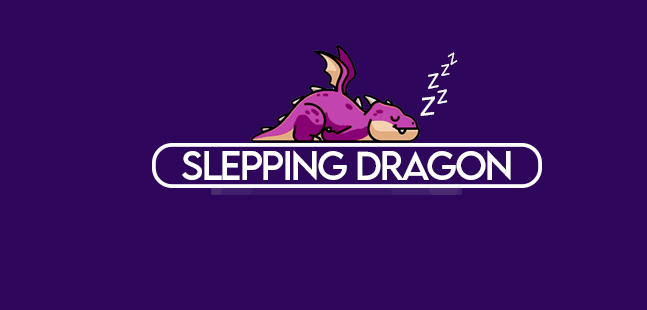
<style>
.page{position:relative;width:647px;height:310px;background:#2e075d}
.page>*{position:absolute;margin:0}
.t1{font:18.8px "DMSansItalic-Italic";letter-spacing:-0.05em;color:#ffffff}
.t2{font:20.6px "DMSansItalic-Italic";letter-spacing:-0.05em;color:#ffffff}
.t3{font:27.4px "DMSansItalic-Italic";letter-spacing:-0.05em;color:#ffffff}
.t4{font:25.1px "DMSansItalic-Italic";letter-spacing:-0.05em;color:#ffffff}
.t5{font:35.3px "DMSansItalic-Italic";letter-spacing:-0.05em;color:#ffffff}
.t6{font:36.1px "LEMONMILK-Regular";letter-spacing:-0.05em;color:#ffffff}
</style>
<div class="page">
<p class="t1" style="left:447px;top:52px;width:11px;height:13px;rotate:-31deg">z</p>
<p class="t2" style="left:441px;top:63px;width:9px;height:13px;rotate:-12deg">z</p>
<p class="t3" style="left:428px;top:73px;width:11px;height:16px;rotate:-12deg">z</p>
<p class="t4" style="left:437px;top:89px;width:11px;height:15px;rotate:-12deg">z</p>
<p class="t5" style="left:420px;top:96px;width:15px;height:20px;rotate:-7deg">z</p>
<p class="t6" style="left:182px;top:150px;width:329px;height:30px">slepping Dragon</p>
</div>
